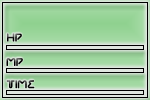
<style>
.page{position:relative;width:150px;height:100px}
.page>*{position:absolute;margin:0}
.t1{font:12px "Chilopod-Regular"}
.t2{font:12px "Chilopod-Regular";color:#010000}
.t3{font:12px "Chilopod-Regular";color:#000000}
</style>
<div class="page">
<p class="t1" style="left:7px;top:33px;width:15px;height:9px">HP</p>
<p class="t2" style="left:6px;top:58px;width:17px;height:8px">MP</p>
<p class="t3" style="left:6px;top:80px;width:29px;height:9px">TIME</p>
</div>
